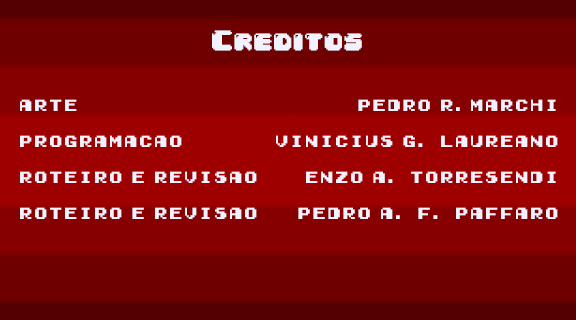
<style>
.page{position:relative;width:576px;height:320px;background:#6e0000}
.page>*{position:absolute;margin:0}
.t1{font:24px "04b30";color:#f2f2ff}
.t2{font:15px "Early-GameBoy";color:#f2f2ff}
</style>
<div class="page">
<p class="t1" style="left:212px;top:30px;width:150px;height:21px">Creditos</p>
<p class="t2" style="left:20px;top:99px;width:237px;height:120px">Arte<br><br>Programacao<br><br>roteiro e revisao<br><br>roteiro e revisao</p>
<p class="t2" style="left:276px;top:99px;width:282px;height:120px;text-align:right">Pedro R.Marchi<br><br>Vinicius G. Laureano<br><br>Enzo A. Torresendi<br><br>Pedro A. F. Paffaro</p>
</div>
